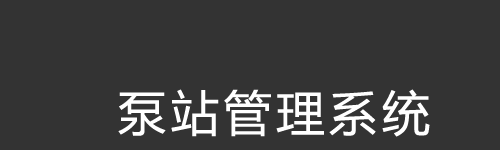
<style>
.page{position:relative;width:500px;height:150px;background:#333333}
.page>*{position:absolute;margin:0}
.t1{font:48px "MicrosoftYaHei";letter-spacing:0.1em;color:#ffffff}
</style>
<div class="page">
<p class="t1" style="left:118px;top:89px;width:312px;height:48px">泵站管理系统</p>
</div>
